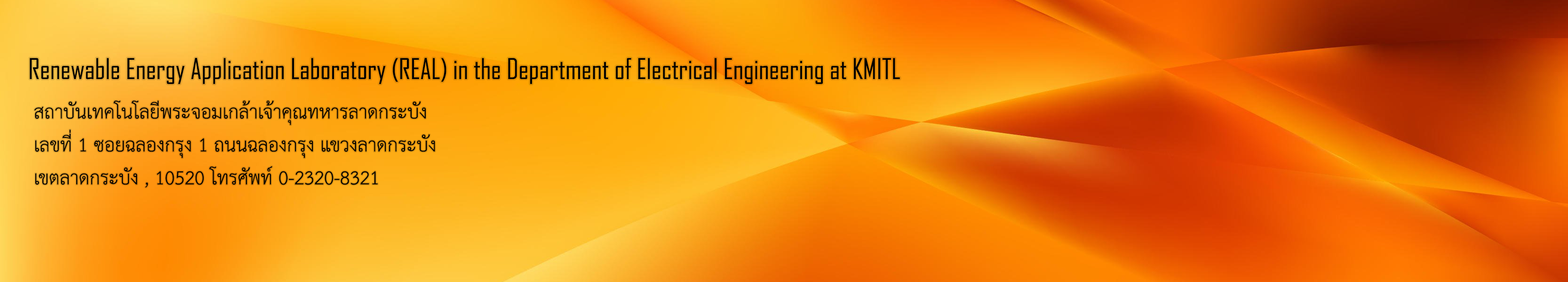
<style>
.page{position:relative;width:1568px;height:282px}
.page>*{position:absolute;margin:0}
.t1{font:27.4px "AgencyFB-Reg";color:#000000}
.t2{font:27.4px "THSarabunPSK";color:#000000}
</style>
<div class="page">
<p class="t1" style="left:30px;top:58px;width:870px;height:26px">Renewable Energy Application Laboratory (REAL) in the Department of Electrical Engineering at KMITL</p>
<p class="t2" style="left:34px;top:100px;width:401px;height:88px">สถาบันเทคโนโลยีพระจอมเกล้าเจ้าคุณทหารลาดกระบัง<br>เลขที่ 1 ซอยฉลองกรุง 1 ถนนฉลองกรุง แขวงลาดกระบัง<br>เขตลาดกระบัง , 10520 โทรศัพท์ 0-2320-8321</p>
</div>
